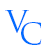
<style>
.page{position:relative;width:50px;height:50px;background:#ffffff}
.page>*{position:absolute;margin:0}
.t1{font:30px "TrajanPro-Regular";color:#006cff}
</style>
<div class="page">
<p class="t1" style="left:5px;top:10px;width:24px;height:23px">V</p>
<p class="t1" style="left:21px;top:22px;width:21px;height:23px">C</p>
</div>
